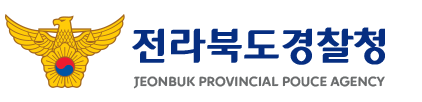
<style>
.page{position:relative;width:422px;height:102px;background:#ffffff}
.page>*{position:absolute;margin:0}
.t1{font:36px "CJ-ONLYONE-Bold";color:#062e81;font-weight:bold}
.t2{font:10px "CJ-ONLYONE-Bold";color:#6a6c6d;font-weight:bold}
</style>
<div class="page">
<p class="t1" style="left:132px;top:27px;width:253px;height:38px">전라북도경찰청</p>
<p class="t2" style="left:133px;top:76px;width:252px;height:13px">JEONBUK PROVINCIAL POUCE AGENCY</p>
</div>
